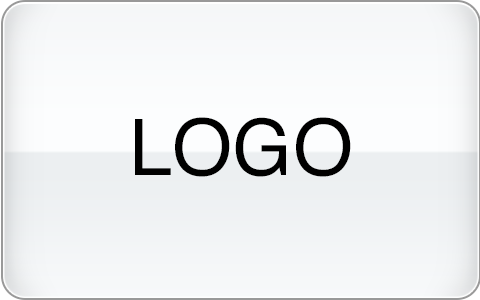
<style>
.page{position:relative;width:480px;height:300px}
.page>*{position:absolute;margin:0}
.t1{font:77.7px "Helvetica";color:#000000}
</style>
<div class="page">
<p class="t1" style="left:135px;top:117px;width:216px;height:60px">LOGO</p>
</div>
